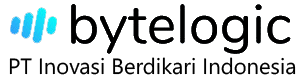
<style>
.page{position:relative;width:304px;height:81px;background:#ffffff}
.page>*{position:absolute;margin:0}
.t1{font:22px "NirmalaUI";color:#000000}
</style>
<div class="page">
<p class="t1" style="left:9px;top:57px;width:287px;height:18px">PT Inovasi Berdikari Indonesia</p>
</div>
